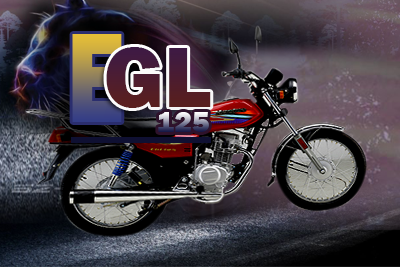
<style>
.page{position:relative;width:400px;height:267px}
.page>*{position:absolute;margin:0}
.t1{font:132.4px "FranklinGothic-Heavy";scale:0.73 1}
.t2{font:88.6px "FranklinGothic-Heavy";color:#4e1d2d}
.t3{font:30px "FranklinGothic-Heavy"}
</style>
<div class="page">
<p class="t1" style="left:72px;top:34px;width:50px;height:88px">E</p>
<p class="t2" style="left:106px;top:47px;width:105px;height:61px">GL</p>
<p class="t3" style="left:158px;top:112px;width:51px;height:20px">125</p>
</div>
